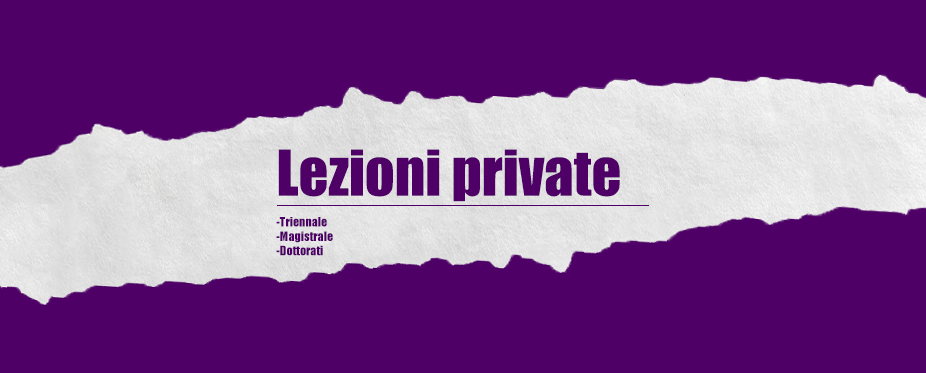
<style>
.page{position:relative;width:926px;height:373px;background:#4f0067}
.page>*{position:absolute;margin:0}
.t1{font:58.4px "Impact";color:#4f0067}
.t2{font:12px "Impact";color:#4f0067}
</style>
<div class="page">
<p class="t1" style="left:278px;top:149px;width:342px;height:53px">Lezioni private</p>
<p class="t2" style="left:276px;top:217px;width:57px;height:39px">-Triennale<br>-Magistrale<br>-Dottorati</p>
</div>
